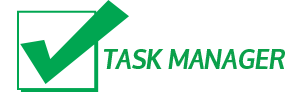
<style>
.page{position:relative;width:300px;height:100px;background:#ffffff}
.page>*{position:absolute;margin:0}
.t1{font:26.5px "Oxygen-BoldItalic";color:#0ba04a;text-transform:uppercase}
</style>
<div class="page">
<p class="t1" style="left:104px;top:49px;width:181px;height:20px">Task Manager</p>
</div>
